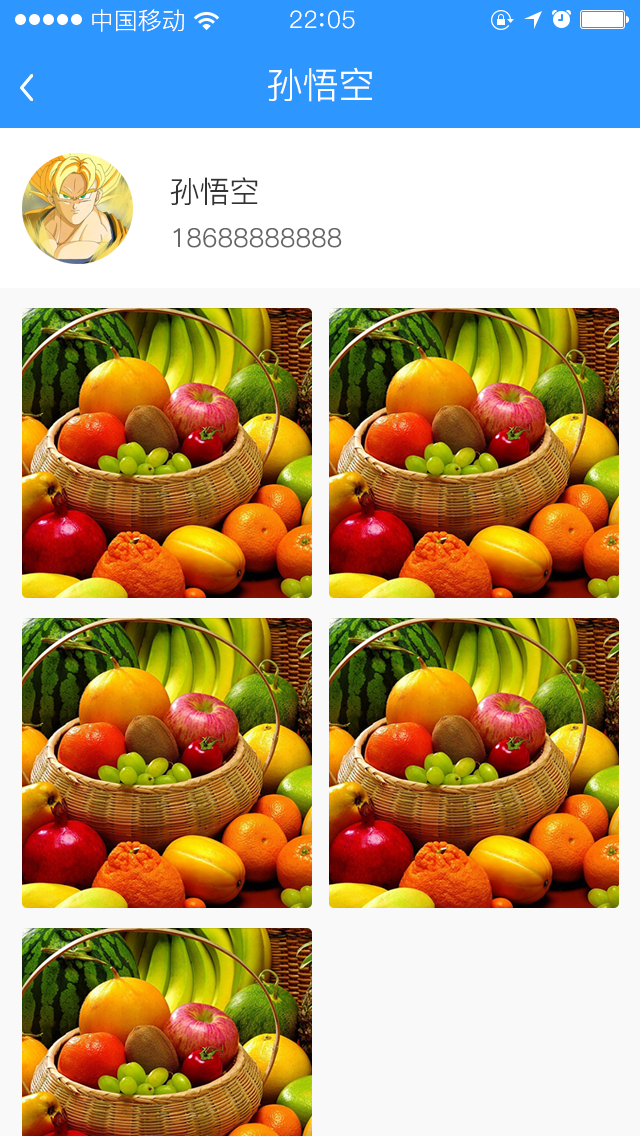
<style>
.page{position:relative;width:640px;height:1136px}
.page>*{position:absolute;margin:0}
.t1{font:24px "PingFang-SC-Regular";color:#ffffff}
.t2{font:24px "PingFang-SC-Regular";letter-spacing:0.03em;color:#ffffff}
.t3{font:36px "PingFang-SC-Regular";color:#ffffff}
.t4{font:30px "PingFang-SC-Regular";color:#333333}
.t5{font:26px "PingFang-SC-Regular";color:#666666}
</style>
<div class="page">
<p class="t1" style="left:92px;top:9px;width:92px;height:23px">中国移动</p>
<p class="t2" style="left:290px;top:10px;width:65px;height:19px">22 05</p>
<p class="t3" style="left:268px;top:67px;width:104px;height:35px">孙悟空</p>
<p class="t4" style="left:170px;top:177px;width:88px;height:29px">孙悟空</p>
<p class="t5" style="left:173px;top:228px;width:169px;height:20px">18688888888</p>
</div>
